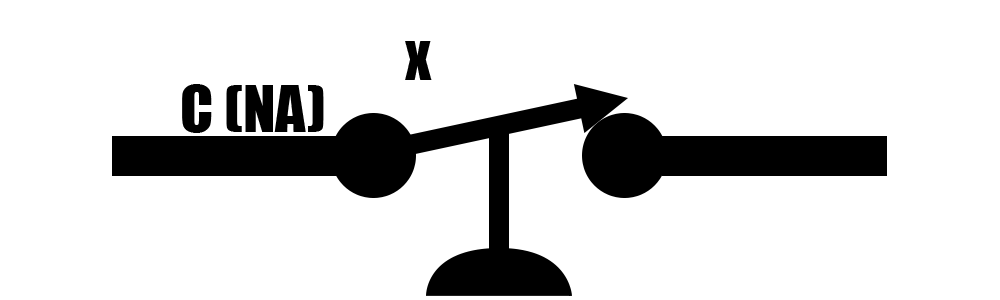
<style>
.page{position:relative;width:1000px;height:300px;background:#ffffff}
.page>*{position:absolute;margin:0}
.t1{font:60px "Impact";color:#000000}
</style>
<div class="page">
<p class="t1" style="left:405px;top:41px;width:27px;height:39px">x</p>
<p class="t1" style="left:182px;top:84px;width:142px;height:49px">C (NA)</p>
</div>
